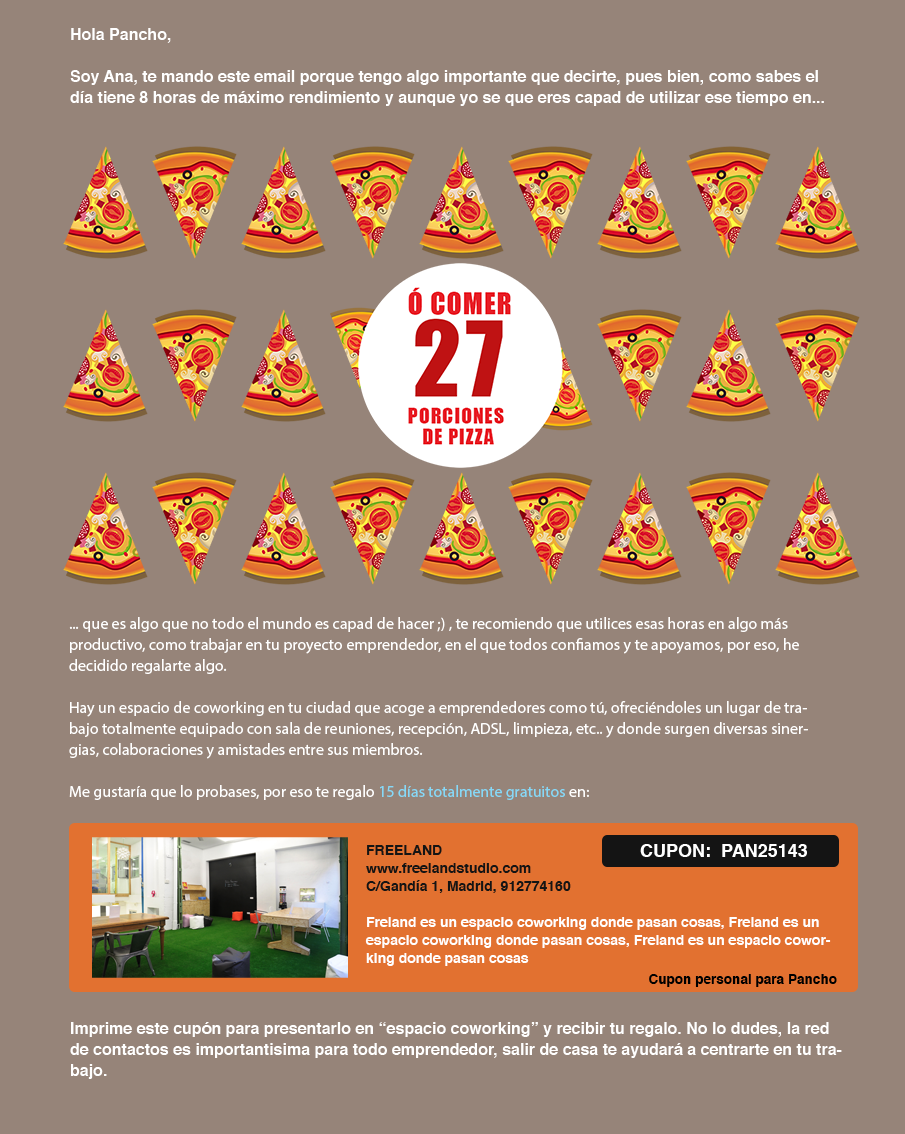
<style>
.page{position:relative;width:905px;height:1134px;background:#968479}
.page>*{position:absolute;margin:0}
.t1{font:16px/21px "Helvetica-Bold";color:#ffffff}
.t2{font:30px/101.5px "Helvetica-Bold";color:#ffffff}
.t3{font:16px/21px "MyriadPro-Regular";color:#ffffff}
.t4{font:16px/21px "MyriadPro-Regular";color:#86d8f7}
.t5{font:14px/18px "Helvetica-Bold";color:#ffffff}
.t6{font:14px/18px "Helvetica-Bold";color:#141414}
.t7{font:18px "Helvetica-Bold";color:#ffffff}
.t8{font:13.6px "Helvetica-Bold";color:#000000}
</style>
<div class="page">
<p class="t1" style="left:70px;top:28px;width:754px;height:78px">Hola Pancho, <br><br>Soy Ana, te mando este email porque tengo algo importante que decirte, pues bien, como sabes el día tiene 8 horas de máximo rendimiento y aunque yo se que eres capad de utilizar ese tiempo en...<br><span class="t2">soy Ana</span></p>
<p class="t3" style="left:69px;top:617px;width:739px;height:183px">... que es algo que no todo el mundo es capad de hacer ;) , te recomiendo que utilices esas horas en algo más productivo, como trabajar en tu proyecto emprendedor, en el que todos confiamos y te apoyamos, por eso, he decidido regalarte algo. <br><br>Hay un espacio de coworking en tu ciudad que acoge a emprendedores como tú, ofreciéndoles un lugar de trabajo totalmente equipado con sala de reuniones, recepción, ADSL, limpieza, etc.. y donde surgen diversas sinergias, colaboraciones y amistades entre sus miembros.<br><br>Me gustaría que lo probases, por eso te regalo <span class="t4">15 días totalmente gratuitos</span> en:</p>
<p class="t5" style="left:365px;top:845px;width:466px;height:121px"><span class="t6">FREELAND<br>www.freelandstudio.com<br>C/Gandía 1, Madrid, 912774160<br></span><br>Freland es un espacio coworking donde pasan cosas, Freland es un espacio coworking donde pasan cosas, Freland es un espacio coworking donde pasan cosas</p>
<p class="t7" style="left:640px;top:844px;width:167px;height:13px">CUPON:  PAN25143</p>
<p class="t8" style="left:649px;top:974px;width:188px;height:13px">Cupon personal para Pancho</p>
<p class="t1" style="left:70px;top:1022px;width:772px;height:57px">Imprime este cupón para presentarlo en “espacio coworking” y recibir tu regalo. No lo dudes, la red de contactos es importantisima para todo emprendedor, salir de casa te ayudará a centrarte en tu trabajo.</p>
</div>
